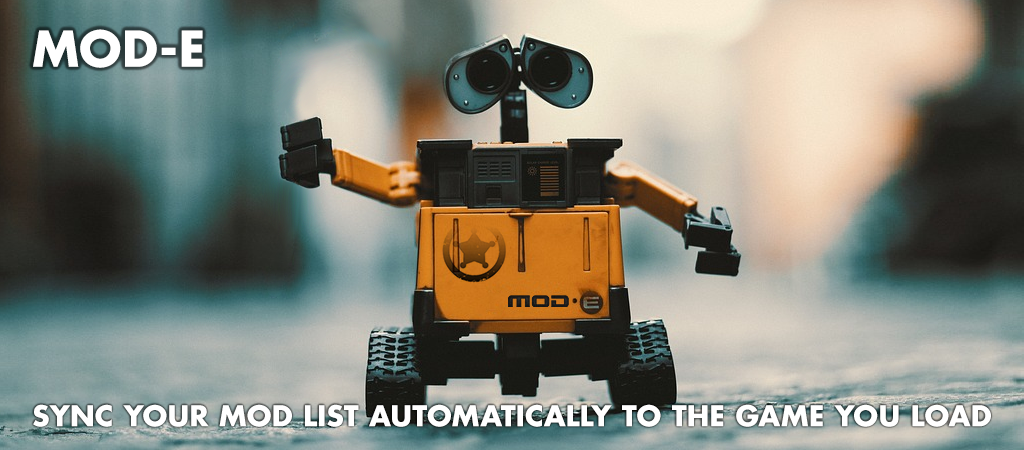
<style>
.page{position:relative;width:1024px;height:450px}
.page>*{position:absolute;margin:0}
.t1{font:48px "FuturaStd-Bold";letter-spacing:0.015em;color:#ffffff;text-transform:uppercase}
.t2{font:28px "FuturaStd-Bold";letter-spacing:0.015em;color:#ffffff;text-transform:uppercase}
</style>
<div class="page">
<p class="t1" style="left:33px;top:29px;width:170px;height:39px">MOD-E</p>
<p class="t2" style="left:33px;top:404px;width:958px;height:23px">Sync your mod list AUTOmatically to the game you load</p>
</div>
